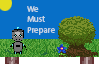
<style>
.page{position:relative;width:99px;height:64px;background:#076fc7}
.page>*{position:absolute;margin:0}
.t1{font:8.7px "MyriadPro-Regular";color:#c4d5e4}
</style>
<div class="page">
<p class="t1" style="left:27px;top:6px;width:28px;height:29px">We<br>Must<br>Prepare</p>
</div>
